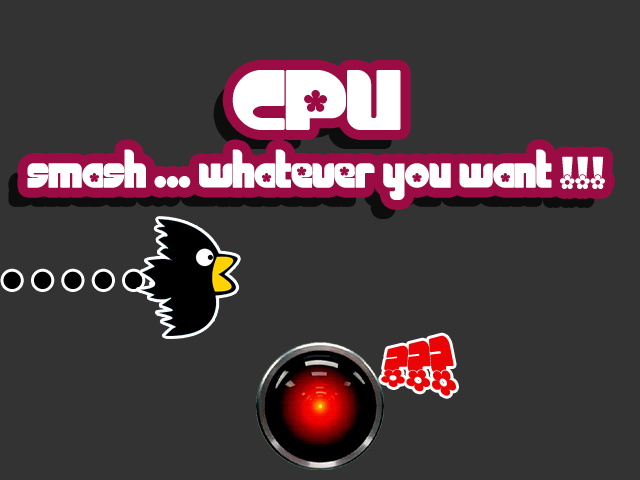
<style>
.page{position:relative;width:640px;height:480px;background:#333333}
.page>*{position:absolute;margin:0}
.t1{font:48px "Chick";color:#ffffff}
.t2{font:120px "Chick";color:#ffffff}
.t3{font:72px "Chick";color:#000000}
.t4{font:72px "Chick";color:#e90505}
</style>
<div class="page">
<p class="t1" style="left:27px;top:70px;width:578px;height:130px;text-align:center"><span class="t2">CPU<br></span>smash ... whatever you want !!!</p>
<p class="t3" style="left:3px;top:271px;width:200px;height:18px">. . . . . . .</p>
<p class="t4" style="left:381px;top:335px;width:75px;height:61px">???</p>
</div>
